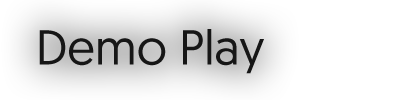
<style>
.page{position:relative;width:400px;height:100px;background:#ffffff}
.page>*{position:absolute;margin:0}
.t1{font:48.9px "Geomanist-Regular";color:#161616}
</style>
<div class="page">
<p class="t1" style="left:39px;top:29px;width:225px;height:45px">Demo Play</p>
</div>
